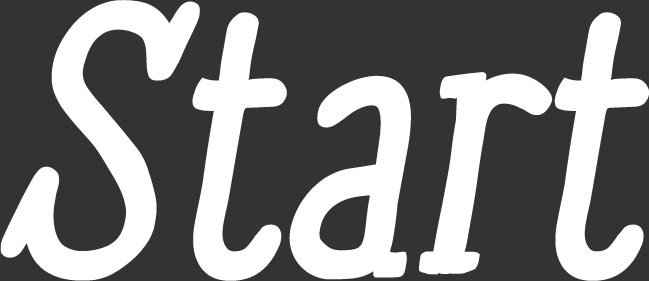
<style>
.page{position:relative;width:649px;height:281px;background:#333333}
.page>*{position:absolute;margin:0}
.t1{font:375px "PanforteSerif-Regular";color:#ffffff;font-style:italic}
</style>
<div class="page">
<p class="t1" style="left:0px;top:0px;width:649px;height:281px">Start</p>
</div>
